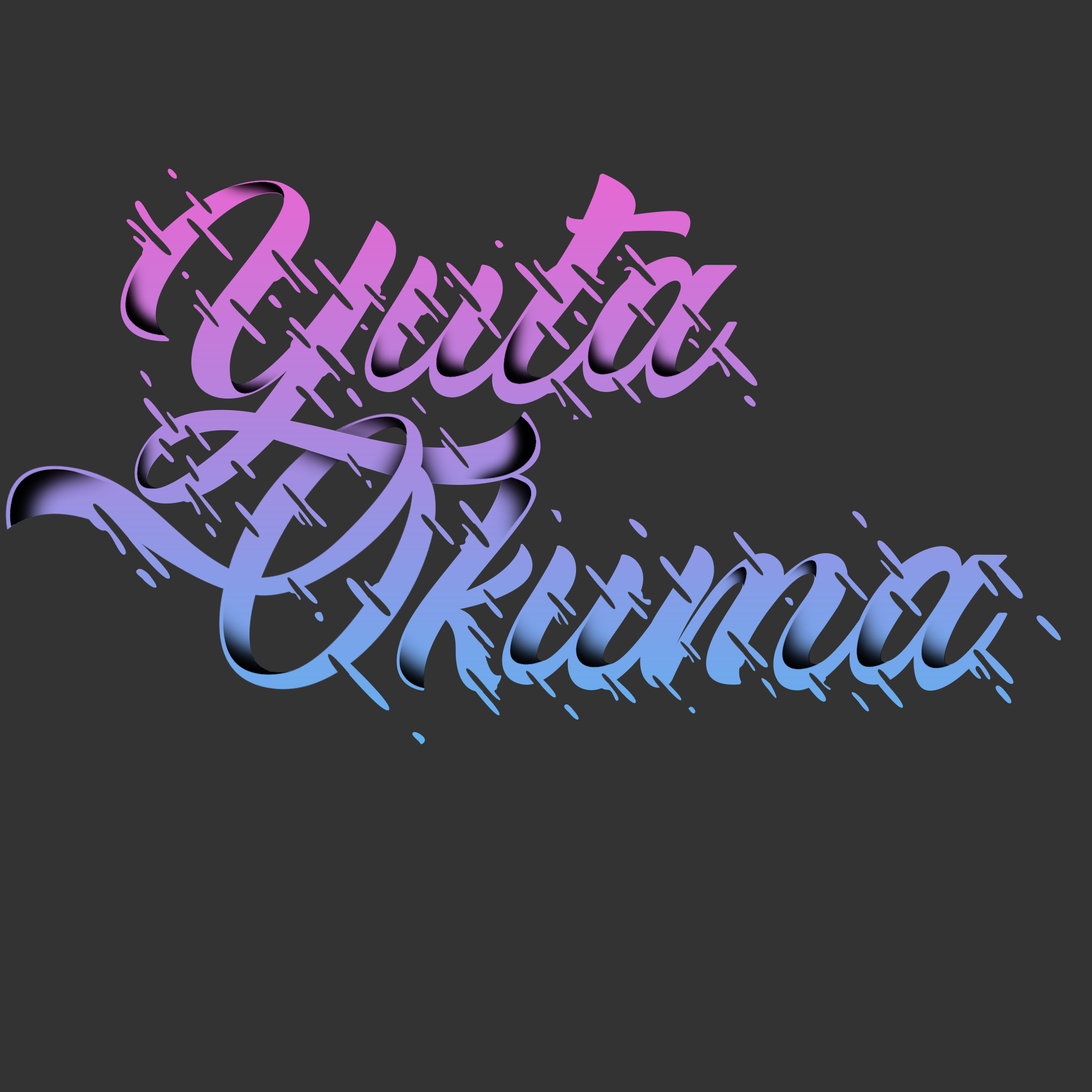
<style>
.page{position:relative;width:1092px;height:1092px;background:#333333}
.page>*{position:absolute;margin:0}
.t1{font:378.1px "Cheetah-Kick---Personal-Use"}
.t2{font:386.7px "Cheetah-Kick---Personal-Use";color:#7b9ee7}
</style>
<div class="page">
<p class="t1" style="left:120px;top:174px;width:617px;height:330px">Yuta</p>
<p class="t2" style="left:396px;top:471px;width:611px;height:221px">kuma</p>
</div>
